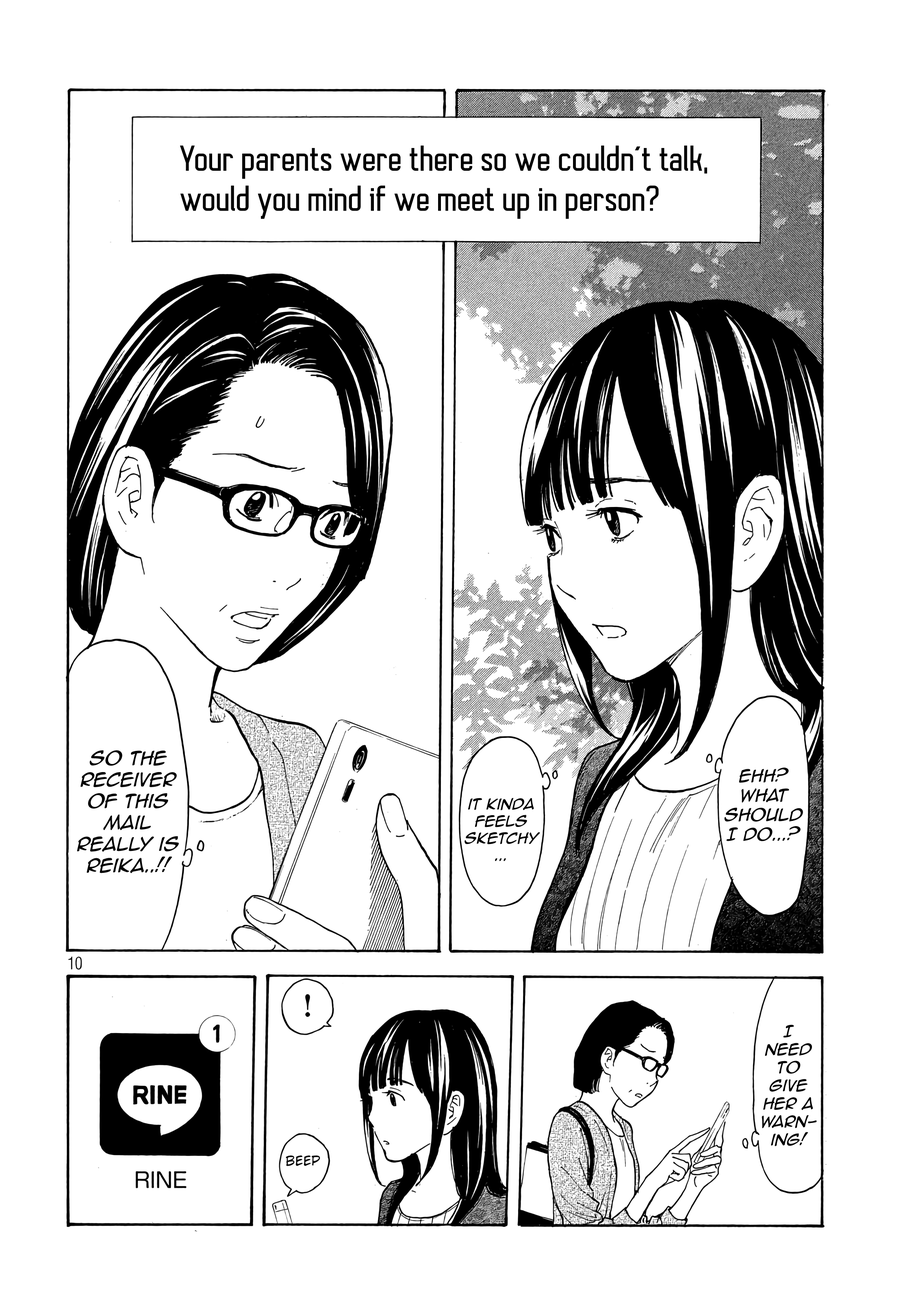
<style>
.page{position:relative;width:916px;height:1301px;background:#ffffff}
.page>*{position:absolute;margin:0}
.t1{font:33.3px "AutobusBold";color:#000000}
.t2{font:17.9px "AnimeAce2.0BB-Italic";color:#000000}
.t3{font:16.3px "AnimeAce2.0BB-Italic";color:#000000}
.t4{font:14.2px "AnimeAce2.0BB-Italic";color:#000000}
.t5{font:15px "AnimeAce2.0BB-Italic";color:#000000}
</style>
<div class="page">
<p class="t1" style="left:180px;top:146px;width:527px;height:73px">Your parents were there so we couldn’t talk, <br>would you mind if we meet up in person?</p>
<p class="t2" style="left:77px;top:750px;width:102px;height:123px;text-align:center">So the receiver of this mail really is Reika..!!</p>
<p class="t3" style="left:725px;top:768px;width:78px;height:73px;text-align:center">Ehh?<br>what should I do...?</p>
<p class="t4" style="left:465px;top:798px;width:75px;height:63px;text-align:center">it kinda feels sketchy<br>...</p>
<p class="t5" style="left:762px;top:1025px;width:55px;height:121px;text-align:center">I <br>need to give her a warning!</p>
</div>
